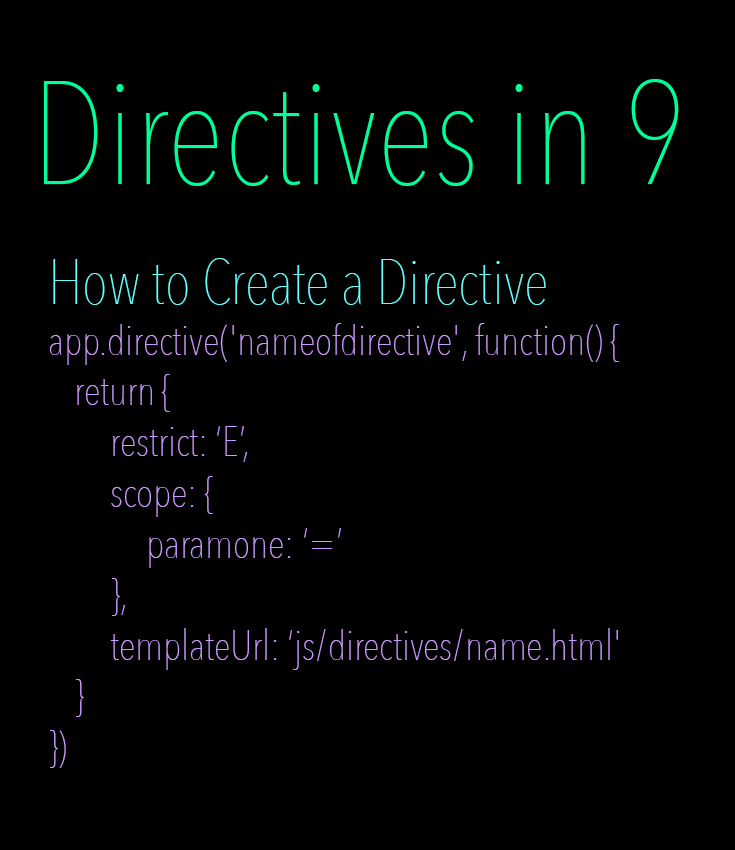
<style>
.page{position:relative;width:735px;height:850px;background:#000000}
.page>*{position:absolute;margin:0}
.t1{font:145.8px "AvenirNextCondensed-UltraLight";color:#00ff99}
.t2{font:41.7px "AvenirNextCondensed-UltraLight";color:#cc99ff}
.t3{font:83.3px "AvenirNextCondensed-UltraLight";color:#00ffff}
.t4{font:62.5px "AvenirNextCondensed-UltraLight";color:#66ffff}
</style>
<div class="page">
<p class="t1" style="left:44px;top:79px;width:635px;height:107px">Directives in 9</p>
<p class="t2" style="left:49px;top:258px;width:570px;height:510px"><span class="t3"><br></span><span class="t4">How to Create a Directive<br></span>app.directive('nameofdirective', function() {<br> return {<br>  restrict: ‘E’,<br>  scope: {<br>   paramone: ‘=’<br>  },<br>  templateUrl: ‘js/directives/name.html'<br> }<br>})</p>
</div>
